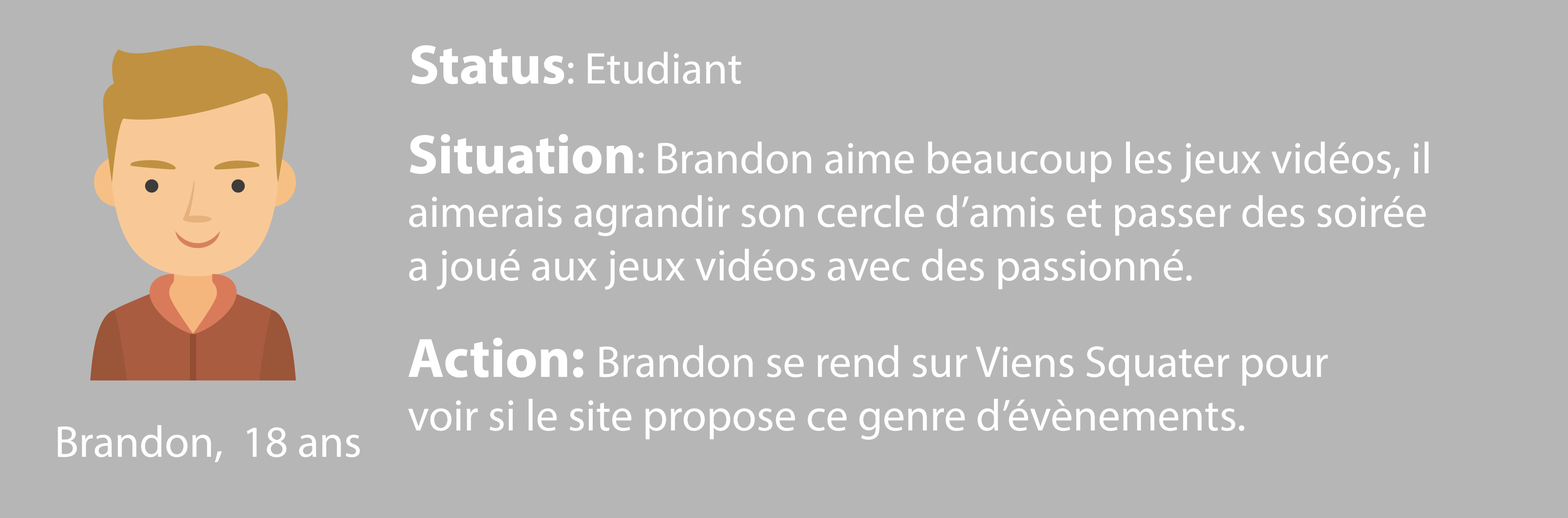
<style>
.page{position:relative;width:1568px;height:518px;background:#b6b6b6}
.page>*{position:absolute;margin:0}
.t1{font:44.7px "MyriadPro-Regular";color:#ffffff}
.t2{font:55.9px "MyriadPro-Bold";color:#ffffff}
</style>
<div class="page">
<p class="t1" style="left:411px;top:45px;width:330px;height:39px"><span class="t2">Status</span>: Etudiant</p>
<p class="t1" style="left:409px;top:134px;width:1020px;height:156px"><span class="t2">Situation</span>: Brandon aime beaucoup les jeux vidéos, il <br>aimerais agrandir son cercle d’amis et passer des soirée <br>a joué aux jeux vidéos avec des passionné.</p>
<p class="t1" style="left:408px;top:338px;width:920px;height:102px"><span class="t2">Action: </span>Brandon se rend sur Viens Squater pour <br>voir si le site propose ce genre d’évènements.</p>
<p class="t1" style="left:58px;top:426px;width:302px;height:37px">Brandon,  18 ans</p>
</div>
